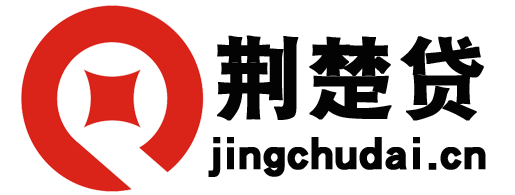
<style>
.page{position:relative;width:515px;height:195px;background:#ffffff}
.page>*{position:absolute;margin:0}
.t1{font:90px "DFPHeiW9";color:#030303;font-weight:bold}
.t2{font:51.6px "DFPHeiW9";color:#030303;font-weight:bold}
</style>
<div class="page">
<p class="t1" style="left:217px;top:35px;width:267px;height:86px">荆楚贷</p>
<p class="t2" style="left:208px;top:137px;width:278px;height:40px">jingchudai.cn</p>
</div>
